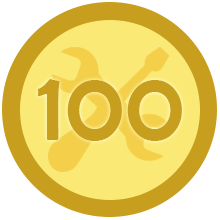
<style>
.page{position:relative;width:220px;height:220px;background:#fae975}
.page>*{position:absolute;margin:0}
.t1{font:100px "BerlinSansFB-Reg";color:#c89e1e}
</style>
<div class="page">
<p class="t1" style="left:38px;top:79px;width:144px;height:62px">100</p>
</div>
